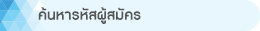
<style>
.page{position:relative;width:260px;height:31px;background:#e8f6fd}
.page>*{position:absolute;margin:0}
.t1{font:18.5px "DBAdmanX-Bold";color:#555555}
</style>
<div class="page">
<p class="t1" style="left:38px;top:7px;width:103px;height:17px">ค้นหารหัสผู้สมัคร</p>
</div>
